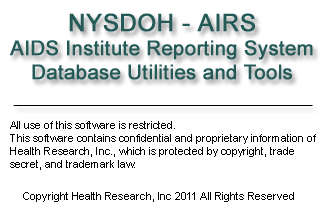
<style>
.page{position:relative;width:324px;height:216px;background:#ffffff}
.page>*{position:absolute;margin:0}
.t1{font:20px "ArialMT";color:#235957;font-weight:bold}
.t2{font:24px "ArialMT";color:#235957;font-weight:bold}
.t3{font:11px "ArialMT";color:#000000}
</style>
<div class="page">
<p class="t1" style="left:10px;top:13px;width:303px;height:67px;text-align:center"><span class="t2">NYSDOH - AIRS<br></span>AIDS Institute Reporting System<br>Database Utilities and Tools</p>
<p class="t3" style="left:23px;top:192px;width:271px;height:10px">Copyright Health Research, Inc 2011 All Rights Reserved</p>
</div>
